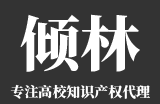
<style>
.page{position:relative;width:160px;height:104px;background:#333333}
.page>*{position:absolute;margin:0}
.t1{font:60px "SourceHanSerifSC-Heavy";color:#ffffff}
.t2{font:14px "SourceHanSerifSC-Heavy";color:#ffffff}
</style>
<div class="page">
<p class="t1" style="left:20px;top:14px;width:120px;height:58px">倾林</p>
<p class="t2" style="left:10px;top:84px;width:140px;height:15px">专注高校知识产权代理</p>
</div>
